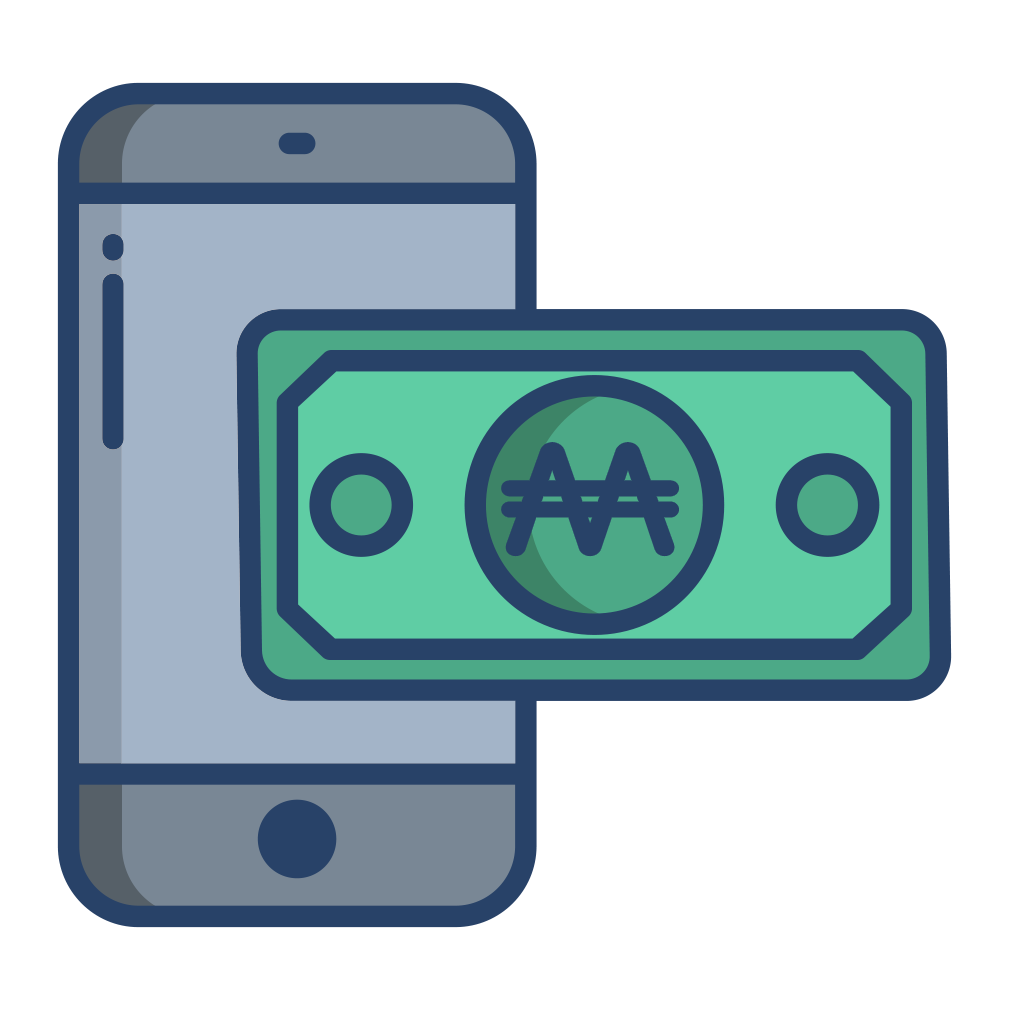
<style>
.page{position:relative;width:1009px;height:1009px;background:#ffffff}
.page>*{position:absolute;margin:0}
.t1{font:154.2px "VarelaRound-Regular";letter-spacing:-0.04em;color:#284268;font-weight:bold;scale:1.11 1}
</style>
<div class="page">
<p class="t1" style="left:503px;top:444px;width:174px;height:111px;rotate:180deg">₩</p>
</div>
